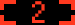
<style>
.page{position:relative;width:75px;height:25px;background:#000000}
.page>*{position:absolute;margin:0}
.t1{font:50px "Thintel";color:#ff391f}
</style>
<div class="page">
<p class="t1" style="left:32px;top:1px;width:13px;height:22px">2</p>
</div>
